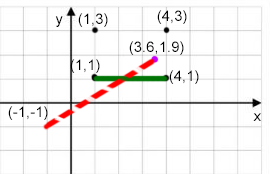
<style>
.page{position:relative;width:270px;height:174px;background:#ffffff}
.page>*{position:absolute;margin:0}
.t1{font:15px "ArialMT";color:#000000}
</style>
<div class="page">
<p class="t1" style="left:55px;top:16px;width:8px;height:11px">y</p>
<p class="t1" style="left:78px;top:13px;width:30px;height:14px">(1,3)</p>
<p class="t1" style="left:157px;top:10px;width:30px;height:14px">(4,3)</p>
<p class="t1" style="left:129px;top:41px;width:55px;height:14px">(3.6,1.9)</p>
<p class="t1" style="left:70px;top:59px;width:30px;height:14px">(1,1)</p>
<p class="t1" style="left:169px;top:70px;width:30px;height:14px">(4,1)</p>
<p class="t1" style="left:8px;top:106px;width:40px;height:14px">(-1,-1)</p>
<p class="t1" style="left:253px;top:113px;width:8px;height:8px">x</p>
</div>
